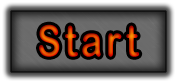
<style>
.page{position:relative;width:178px;height:84px}
.page>*{position:absolute;margin:0}
.t1{font:43.2px "ArialRoundedMTBold";letter-spacing:0.1em;scale:0.83 1}
</style>
<div class="page">
<p class="t1" style="left:39px;top:24px;width:101px;height:33px">Start</p>
</div>
